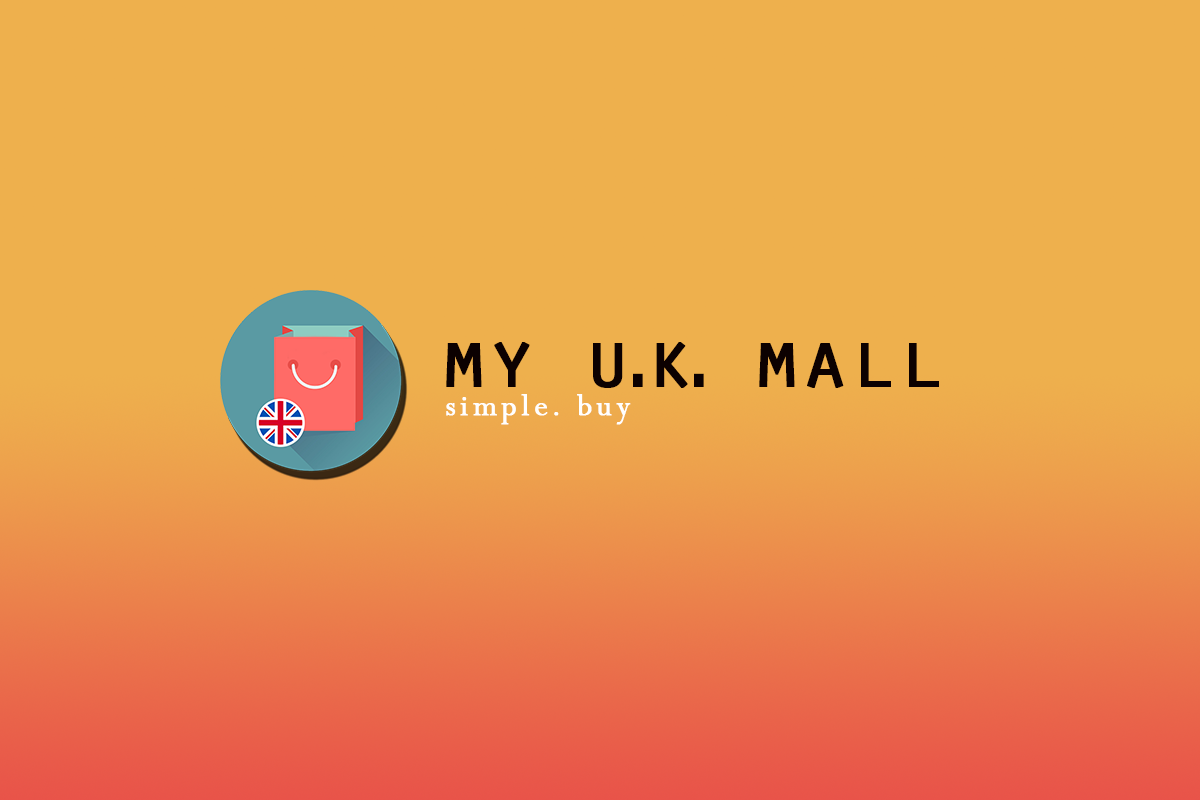
<style>
.page{position:relative;width:1200px;height:800px;background:#eeb04d}
.page>*{position:absolute;margin:0}
.t1{font:82px "OratorStd";letter-spacing:-0.26em;color:#0c0101;font-weight:bold}
.t2{font:82px "OratorStd";letter-spacing:-0.04em;color:#0c0101;font-weight:bold}
.t3{font:33px "Perpetua";letter-spacing:0.12em;color:#ffffff;font-weight:bold}
</style>
<div class="page">
<p class="t1" style="left:446px;top:342px;width:493px;height:46px"><span class="t2">my </span>u.k.<span class="t2"> mall</span></p>
<p class="t3" style="left:446px;top:394px;width:185px;height:31px">simple. buy</p>
</div>
